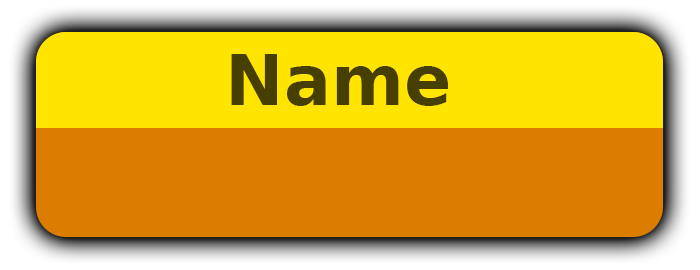
<style>
.page{position:relative;width:700px;height:270px;background:#dd7d00}
.page>*{position:absolute;margin:0}
.t1{font:70px "DejaVuSans-Bold";color:#473f00}
</style>
<div class="page">
<p class="t1" style="left:231px;top:54px;width:217px;height:52px">Name</p>
</div>
